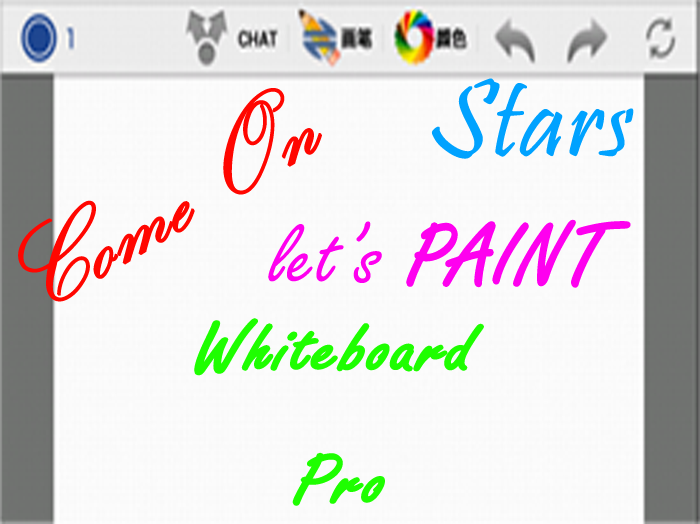
<style>
.page{position:relative;width:700px;height:524px;background:#fbfbfb}
.page>*{position:absolute;margin:0}
.t1{font:111px "Pristina-Regular";color:#00a2ff;font-weight:bold}
.t2{font:111px "KunstlerScript";color:#ff0600;font-weight:bold}
.t3{font:37px "SimSun";color:#000000;font-weight:bold}
.t4{font:92.5px "FreestyleScript-Regular";color:#fe00ef}
.t5{font:92.5px "FreestyleScript-Regular";color:#fe00ef;font-weight:bold}
.t6{font:75.7px "FreestyleScript-Regular";color:#1efe00;font-weight:bold;scale:1.19 1}
</style>
<div class="page">
<p class="t1" style="left:431px;top:78px;width:203px;height:81px">Stars</p>
<p class="t2" style="left:18px;top:88px;width:304px;height:214px;rotate:-31deg">Come On<br><br><span class="t3">Stars</span></p>
<p class="t4" style="left:268px;top:219px;width:363px;height:69px">let’s<span class="t5"> PAINT</span></p>
<p class="t6" style="left:194px;top:318px;width:290px;height:188px">Whiteboard<br>    Pro</p>
</div>
